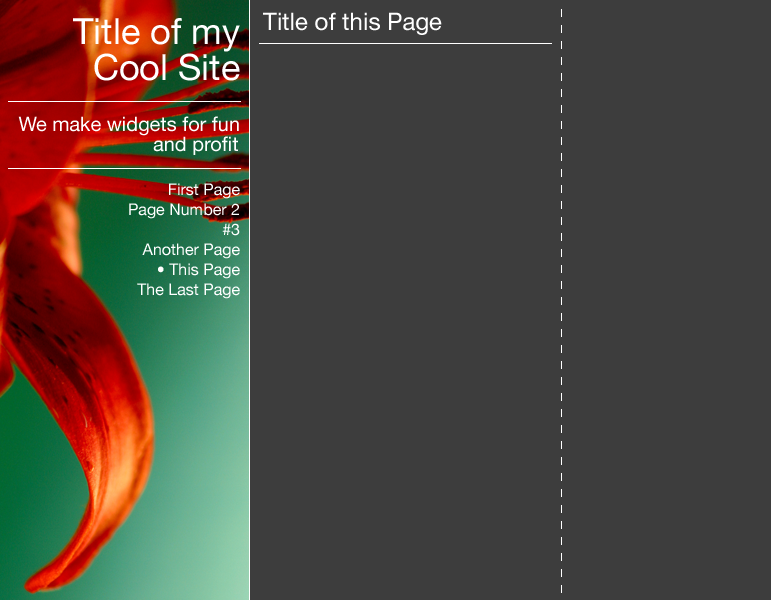
<style>
.page{position:relative;width:771px;height:600px;background:#3d3d3d}
.page>*{position:absolute;margin:0}
.t1{font:24px "HelveticaNeue";color:#ffffff}
.t2{font:36px/36px "HelveticaNeue";color:#ffffff}
.t3{font:20px/20px "HelveticaNeue";color:#ffffff}
.t4{font:16px/20px "HelveticaNeue";color:#ffffff}
</style>
<div class="page">
<p class="t1" style="left:263px;top:12px;width:179px;height:23px">Title of this Page</p>
<p class="t2" style="left:73px;top:18px;width:167px;height:63px;text-align:right">Title of my Cool Site</p>
<p class="t3" style="left:18px;top:116px;width:221px;height:39px;text-align:right">We make widgets for fun and profit</p>
<p class="t4" style="left:129px;top:183px;width:111px;height:116px;text-align:right">First Page<br>Page Number 2<br>#3<br>Another Page<br>• This Page<br>The Last Page</p>
</div>
